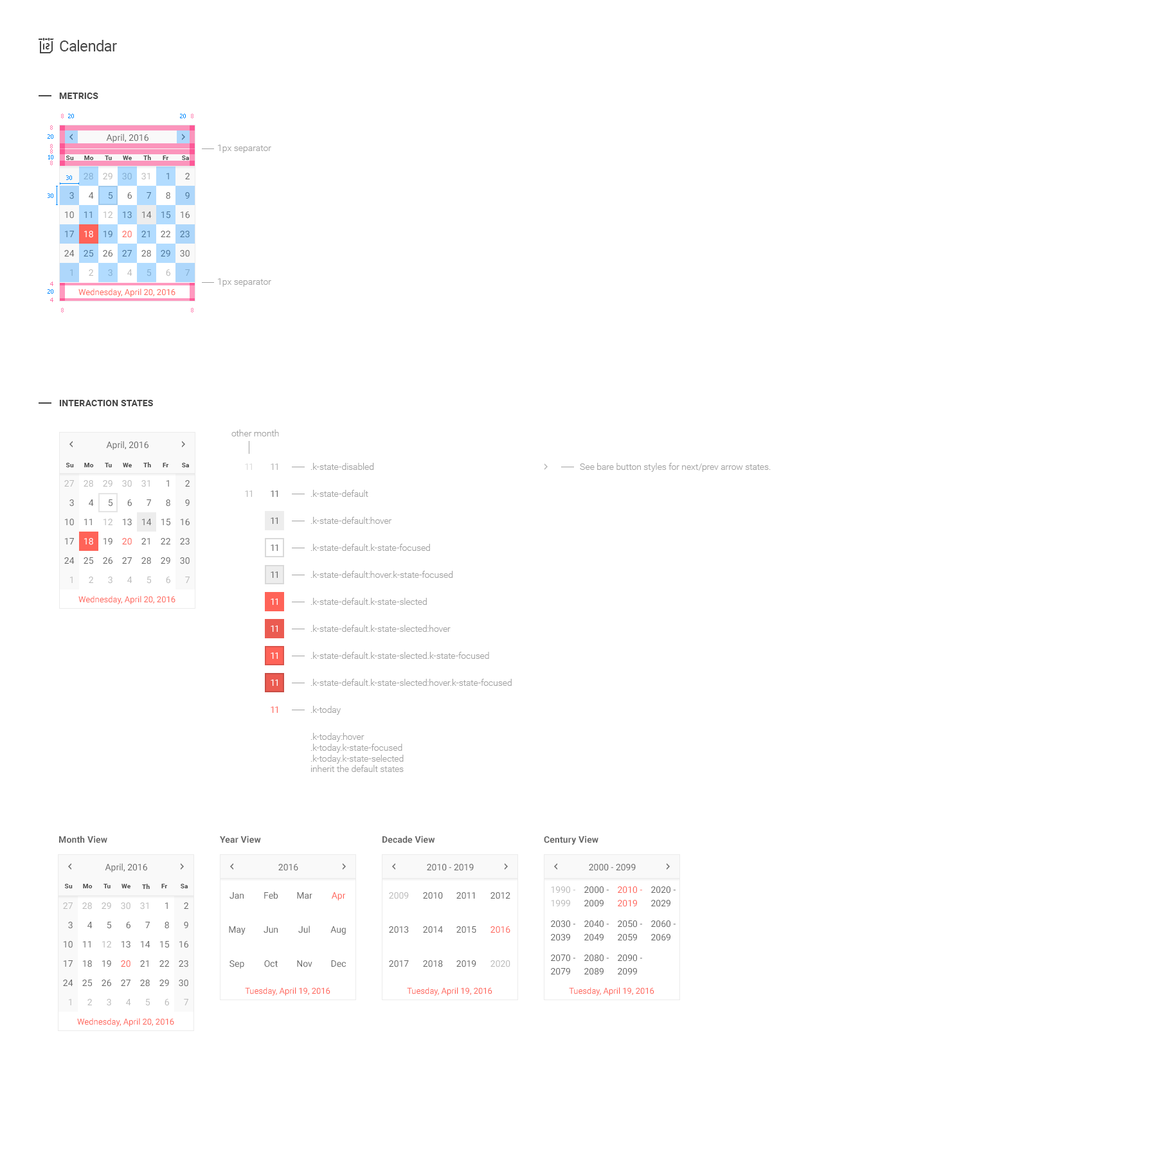
<style>
.page{position:relative;width:1157px;height:1157px;background:#ffffff}
.page>*{position:absolute;margin:0}
.t1{font:15.4px "Roboto-Regular";letter-spacing:-0.025em;color:#454545}
.t2{font:9px "Roboto-Bold";letter-spacing:0.01em;color:#454545;text-transform:uppercase}
.t3{font:5.8px "Tahoma";color:#ff7cae}
.t4{font:5.8px "Tahoma";color:#008aff}
.t5{font:9px "Roboto-Regular";color:#656565}
.t6{font:9px "Roboto-Light";color:#a1a1a1}
.t7{font:6.4px "Roboto-Bold";letter-spacing:0.01em;color:#454545}
.t8{font:9px/19.3px "Roboto-Regular"}
.t9{font:9px/19.3px "Roboto-Regular";color:#656565}
.t10{font:9px/19.3px "Roboto-Regular";color:#bababa}
.t11{font:8.4px "Roboto-Regular";color:#ff6358}
.t12{font:9px "Roboto-Regular";color:#dcdcdc}
.t13{font:9px "Roboto-Regular";color:#b2b2b2}
.t14{font:9px/27px "Roboto-Light";color:#a1a1a1}
.t15{font:9px/19.3px "Roboto-Light";color:#a1a1a1}
.t16{font:9px/19.3px "Roboto-Regular";color:#ffffff}
.t17{font:9px/19.3px "Roboto-Regular";color:#ff6358}
.t18{font:9px "Roboto-Regular";color:#bababa}
.t19{font:9px "Roboto-Regular";color:#ffffff}
.t20{font:9px "Roboto-Regular";color:#ff6358}
.t21{font:9px "Roboto-Bold";letter-spacing:0.01em;color:#656565}
.t22{font:9px/34.1px "Roboto-Regular";color:#656565}
.t23{font:9px/34.1px "Roboto-Regular";color:#ff6358}
.t24{font:9px/34.1px "Roboto-Regular";color:#bababa}
.t25{font:9px/13.5px "Roboto-Regular";color:#bababa}
.t26{font:9px/20.6px "Roboto-Regular";color:#656565}
.t27{font:9px/13.5px "Roboto-Regular";color:#656565}
.t28{font:9px/13.5px "Roboto-Regular";color:#ff6358}
</style>
<div class="page">
<p class="t1" style="left:60px;top:40px;width:57px;height:11px">Calendar</p>
<p class="t2" style="left:59px;top:93px;width:39px;height:6px">Metrics</p>
<p class="t3" style="left:61px;top:114px;width:3px;height:4px">8</p>
<p class="t4" style="left:68px;top:114px;width:6px;height:4px">20</p>
<p class="t4" style="left:180px;top:114px;width:6px;height:4px">20</p>
<p class="t3" style="left:191px;top:114px;width:3px;height:4px">8</p>
<p class="t3" style="left:50px;top:125px;width:3px;height:5px">8</p>
<p class="t4" style="left:48px;top:134px;width:5px;height:5px">20</p>
<p class="t5" style="left:106px;top:134px;width:42px;height:9px">April, 2016</p>
<p class="t3" style="left:50px;top:144px;width:3px;height:4px">8</p>
<p class="t3" style="left:50px;top:149px;width:3px;height:5px">8</p>
<p class="t6" style="left:218px;top:145px;width:53px;height:8px">1px separator</p>
<p class="t4" style="left:48px;top:155px;width:5px;height:4px">10</p>
<p class="t3" style="left:50px;top:161px;width:3px;height:4px">8</p>
<p class="t7" style="left:66px;top:156px;width:8px;height:4px">Su</p>
<p class="t7" style="left:84px;top:156px;width:10px;height:4px">Mo</p>
<p class="t7" style="left:105px;top:156px;width:7px;height:4px">Tu</p>
<p class="t7" style="left:123px;top:156px;width:9px;height:4px">We</p>
<p class="t7" style="left:143px;top:155px;width:8px;height:5px">Th</p>
<p class="t7" style="left:163px;top:156px;width:6px;height:4px">Fr</p>
<p class="t7" style="left:182px;top:156px;width:7px;height:4px">Sa</p>
<p class="t8" style="left:84px;top:173px;width:10px;height:103px;text-align:right">28<br>4<br>11<br>18<br>25<br>2</p>
<p class="t9" style="left:103px;top:173px;width:10px;height:103px;text-align:right"><span class="t10">29<br></span>5<br><span class="t10">12<br></span>19<br>26<br><span class="t10">3</span></p>
<p class="t8" style="left:122px;top:173px;width:10px;height:103px;text-align:right">30<br>6<br>13<br>20<br>27<br>4</p>
<p class="t8" style="left:141px;top:173px;width:11px;height:103px;text-align:right">31<br>7<br>14<br>21<br>28<br>5</p>
<p class="t8" style="left:161px;top:173px;width:9px;height:103px;text-align:right">1<br>8<br>15<br>22<br>29<br>6</p>
<p class="t8" style="left:180px;top:173px;width:10px;height:103px;text-align:right">2<br>9<br>16<br>23<br>30<br>7</p>
<p class="t4" style="left:66px;top:176px;width:6px;height:4px">30</p>
<p class="t4" style="left:48px;top:194px;width:5px;height:4px">30</p>
<p class="t9" style="left:64px;top:192px;width:11px;height:84px;text-align:right"><span class="t10"><br></span>3<br>10<br>17<br>24<br><span class="t10">1</span></p>
<p class="t3" style="left:50px;top:282px;width:3px;height:4px">4</p>
<p class="t6" style="left:218px;top:278px;width:53px;height:9px">1px separator</p>
<p class="t4" style="left:48px;top:289px;width:5px;height:5px">20</p>
<p class="t11" style="left:78px;top:289px;width:98px;height:8px">Wednesday, April 20, 2016</p>
<p class="t3" style="left:50px;top:298px;width:3px;height:4px">4</p>
<p class="t3" style="left:61px;top:308px;width:3px;height:4px">8</p>
<p class="t3" style="left:191px;top:308px;width:3px;height:4px">8</p>
<p class="t2" style="left:59px;top:400px;width:94px;height:6px">Interaction states</p>
<p class="t6" style="left:231px;top:429px;width:48px;height:8px">other month</p>
<p class="t5" style="left:106px;top:441px;width:42px;height:9px">April, 2016</p>
<p class="t7" style="left:66px;top:463px;width:8px;height:4px">Su</p>
<p class="t7" style="left:84px;top:463px;width:10px;height:4px">Mo</p>
<p class="t7" style="left:105px;top:463px;width:7px;height:4px">Tu</p>
<p class="t7" style="left:123px;top:463px;width:9px;height:4px">We</p>
<p class="t7" style="left:143px;top:462px;width:8px;height:5px">Th</p>
<p class="t7" style="left:163px;top:463px;width:6px;height:4px">Fr</p>
<p class="t7" style="left:182px;top:463px;width:7px;height:4px">Sa</p>
<p class="t12" style="left:245px;top:464px;width:7px;height:6px">11</p>
<p class="t13" style="left:271px;top:464px;width:7px;height:6px">11</p>
<p class="t14" style="left:310px;top:463px;width:202px;height:309px">.k-state-disabled<br>.k-state-default<br>.k-state-default:hover<br>.k-state-default.k-state-focused<br>.k-state-default<span class="t15">:hover</span>.k-state-focused<br>.k-state-default.k-state-slected<br>.k-state-default.k-state-slected:hover<br>.k-state-default.k-state-slected.k-state-focused<br>.k-state-default.k-state-slected:hover.k-state-focused<br>.k-today<br>.k-today:hover<br><span class="t6">.k-today.k-state-focused<br>.k-today.k-state-selected<br>inherit the default states</span></p>
<p class="t6" style="left:580px;top:463px;width:191px;height:9px">See bare button styles for next/prev arrow states.</p>
<p class="t9" style="left:64px;top:480px;width:11px;height:103px;text-align:right"><span class="t10">27<br></span>3<br>10<br>17<br>24<br><span class="t10">1</span></p>
<p class="t9" style="left:84px;top:480px;width:10px;height:103px;text-align:right"><span class="t10">28<br></span>4<br>11<br><span class="t16">18<br></span>25<br><span class="t10">2</span></p>
<p class="t9" style="left:103px;top:480px;width:10px;height:104px;text-align:right"><span class="t10">29<br></span>5<br><span class="t10">12<br></span>19<br>26<br><span class="t10">3</span></p>
<p class="t9" style="left:122px;top:480px;width:10px;height:103px;text-align:right"><span class="t10">30<br></span>6<br>13<br><span class="t17">20<br></span>27<br><span class="t10">4</span></p>
<p class="t9" style="left:141px;top:480px;width:11px;height:104px;text-align:right"><span class="t10">31<br></span>7<br>14<br>21<br>28<br><span class="t10">5</span></p>
<p class="t9" style="left:161px;top:480px;width:9px;height:104px;text-align:right">1<br>8<br>15<br>22<br>29<br><span class="t10">6</span></p>
<p class="t9" style="left:180px;top:480px;width:10px;height:103px;text-align:right">2<br>9<br>16<br>23<br>30<br><span class="t10">7</span></p>
<p class="t18" style="left:245px;top:491px;width:7px;height:6px">11</p>
<p class="t5" style="left:271px;top:491px;width:7px;height:6px">11</p>
<p class="t5" style="left:271px;top:518px;width:7px;height:6px">11</p>
<p class="t5" style="left:271px;top:544px;width:7px;height:7px">11</p>
<p class="t5" style="left:271px;top:572px;width:7px;height:6px">11</p>
<p class="t11" style="left:78px;top:596px;width:98px;height:8px">Wednesday, April 20, 2016</p>
<p class="t19" style="left:271px;top:598px;width:7px;height:7px">11</p>
<p class="t19" style="left:271px;top:626px;width:7px;height:6px">11</p>
<p class="t19" style="left:271px;top:652px;width:7px;height:7px">11</p>
<p class="t19" style="left:271px;top:680px;width:7px;height:6px">11</p>
<p class="t20" style="left:271px;top:706px;width:7px;height:7px">11</p>
<p class="t21" style="left:59px;top:836px;width:48px;height:7px">Month View</p>
<p class="t21" style="left:220px;top:836px;width:41px;height:7px">Year View</p>
<p class="t21" style="left:382px;top:836px;width:53px;height:7px">Decade View</p>
<p class="t21" style="left:544px;top:836px;width:54px;height:9px">Century View</p>
<p class="t5" style="left:105px;top:863px;width:42px;height:9px">April, 2016</p>
<p class="t5" style="left:278px;top:864px;width:20px;height:7px">2016</p>
<p class="t5" style="left:427px;top:864px;width:47px;height:7px">2010 - 2019</p>
<p class="t5" style="left:589px;top:864px;width:47px;height:7px">2000 - 2099</p>
<p class="t7" style="left:64px;top:884px;width:9px;height:4px">Su</p>
<p class="t7" style="left:83px;top:884px;width:10px;height:4px">Mo</p>
<p class="t7" style="left:104px;top:884px;width:7px;height:4px">Tu</p>
<p class="t7" style="left:122px;top:884px;width:8px;height:4px">We</p>
<p class="t7" style="left:142px;top:884px;width:8px;height:5px">Th</p>
<p class="t7" style="left:161px;top:884px;width:7px;height:4px">Fr</p>
<p class="t7" style="left:181px;top:884px;width:7px;height:4px">Sa</p>
<p class="t22" style="left:229px;top:892px;width:17px;height:77px;text-align:center">Jan<br>May<br>Sep</p>
<p class="t22" style="left:264px;top:892px;width:14px;height:76px;text-align:center">Feb<br>Jun<br>Oct</p>
<p class="t22" style="left:297px;top:892px;width:15px;height:76px;text-align:center">Mar<br>Jul<br>Nov</p>
<p class="t22" style="left:330px;top:892px;width:16px;height:76px;text-align:center"><span class="t23">Apr<br></span>Aug<br>Dec</p>
<p class="t22" style="left:389px;top:892px;width:20px;height:76px;text-align:center"><span class="t24">2009<br></span>2013<br>2017</p>
<p class="t22" style="left:423px;top:892px;width:20px;height:76px;text-align:center">2010<br>2014<br>2018</p>
<p class="t22" style="left:456px;top:892px;width:20px;height:76px;text-align:center">2011<br>2015<br>2019</p>
<p class="t22" style="left:491px;top:892px;width:19px;height:76px;text-align:center">2012<br><span class="t23">2016<br></span><span class="t24">2020</span></p>
<p class="t24" style="left:551px;top:887px;width:24px;height:88px">1990 - <br><span class="t25">1999<br></span><span class="t26">2030 - <br></span><span class="t27">2039<br></span><span class="t26">2070 - <br></span><span class="t27">2079</span></p>
<p class="t22" style="left:584px;top:887px;width:25px;height:88px">2000 - <br><span class="t27">2009<br></span><span class="t26">2040 - <br></span><span class="t27">2049<br></span><span class="t26">2080 - <br></span><span class="t27">2089</span></p>
<p class="t23" style="left:618px;top:887px;width:24px;height:88px">2010 - <br><span class="t28">2019<br></span><span class="t26">2050 - <br></span><span class="t27">2059<br></span><span class="t26">2090 - <br></span><span class="t27">2099</span></p>
<p class="t22" style="left:651px;top:887px;width:25px;height:54px">2020 - <br><span class="t27">2029<br></span><span class="t26">2060 - <br></span><span class="t27">2069</span></p>
<p class="t9" style="left:63px;top:903px;width:10px;height:102px;text-align:right"><span class="t10">27<br></span>3<br>10<br>17<br>24<br><span class="t10">1</span></p>
<p class="t9" style="left:82px;top:903px;width:11px;height:102px;text-align:right"><span class="t10">28<br></span>4<br>11<br>18<br>25<br><span class="t10">2</span></p>
<p class="t9" style="left:102px;top:903px;width:9px;height:103px;text-align:right"><span class="t10">29<br></span>5<br><span class="t10">12<br></span>19<br>26<br><span class="t10">3</span></p>
<p class="t9" style="left:121px;top:903px;width:10px;height:102px;text-align:right"><span class="t10">30<br></span>6<br>13<br><span class="t17">20<br></span>27<br><span class="t10">4</span></p>
<p class="t9" style="left:140px;top:903px;width:10px;height:103px;text-align:right"><span class="t10">31<br></span>7<br>14<br>21<br>28<br><span class="t10">5</span></p>
<p class="t9" style="left:159px;top:903px;width:10px;height:103px;text-align:right">1<br>8<br>15<br>22<br>29<br><span class="t10">6</span></p>
<p class="t9" style="left:179px;top:903px;width:9px;height:102px;text-align:right">2<br>9<br>16<br>23<br>30<br><span class="t10">7</span></p>
<p class="t11" style="left:245px;top:987px;width:85px;height:9px">Tuesday, April 19, 2016</p>
<p class="t11" style="left:407px;top:987px;width:85px;height:9px">Tuesday, April 19, 2016</p>
<p class="t11" style="left:569px;top:987px;width:85px;height:9px">Tuesday, April 19, 2016</p>
<p class="t11" style="left:77px;top:1018px;width:97px;height:9px">Wednesday, April 20, 2016</p>
</div>
